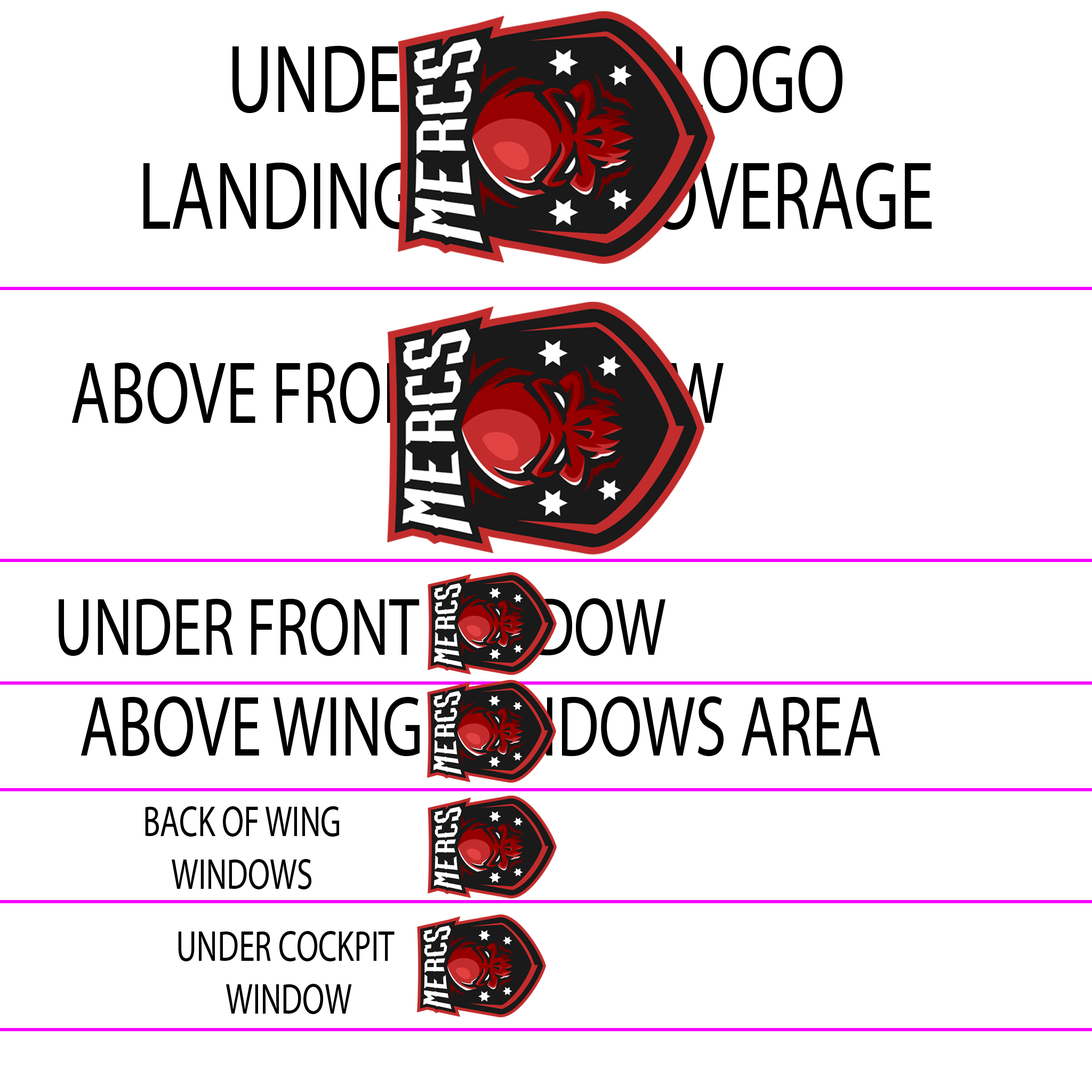
<style>
.page{position:relative;width:1092px;height:1092px;background:#ffffff}
.page>*{position:absolute;margin:0}
.t1{font:97px "MyriadPro-Regular";text-transform:uppercase;scale:0.73 1}
.t2{font:88.7px "MyriadPro-Regular";text-transform:uppercase;scale:0.73 1}
.t3{font:82.1px "MyriadPro-Regular";color:#000000;text-transform:uppercase;scale:0.73 1}
.t4{font:86.2px "MyriadPro-Regular";color:#000000;text-transform:uppercase;scale:0.73 1}
.t5{font:43.7px "MyriadPro-Regular";color:#000000;text-transform:uppercase;scale:0.73 1}
</style>
<div class="page">
<p class="t1" style="left:143px;top:45px;width:789px;height:185px;text-align:center">under neath logo<br>landing Gear coverage</p>
<p class="t2" style="left:72px;top:362px;width:652px;height:62px">above front window</p>
<p class="t3" style="left:59px;top:598px;width:606px;height:58px">under front window</p>
<p class="t4" style="left:81px;top:696px;width:799px;height:61px">above wing  windows area</p>
<p class="t5" style="left:145px;top:806px;width:194px;height:83px;text-align:center">back of wing<br>windows</p>
<p class="t5" style="left:178px;top:931px;width:217px;height:83px;text-align:center">under cockpit <br>window</p>
</div>
